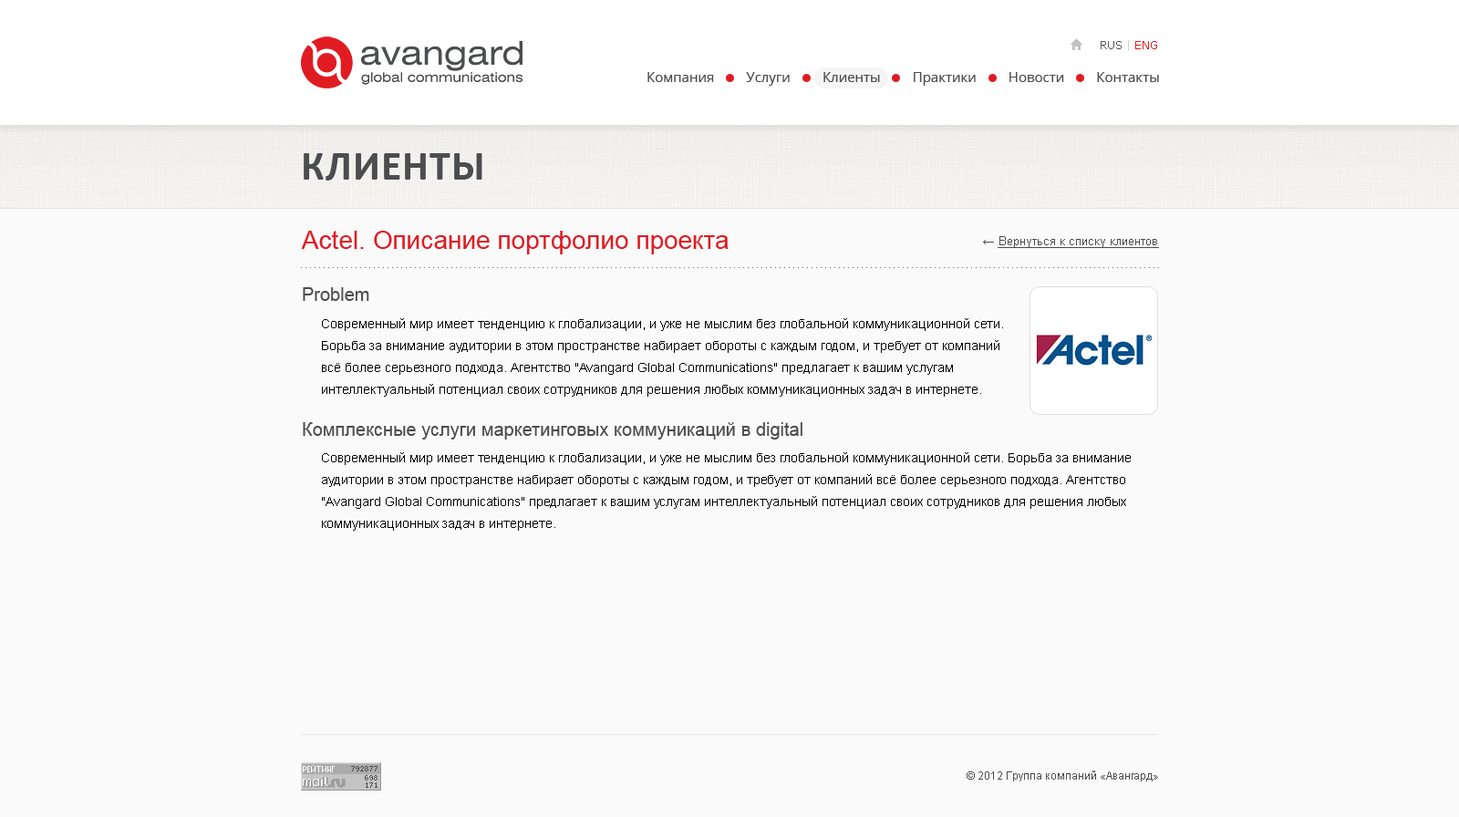
<style>
.page{position:relative;width:1459px;height:817px;background:#fafafa}
.page>*{position:absolute;margin:0}
.t1{font:10.9px "Verdana";color:#555555}
.t2{font:10.9px "Verdana";color:#d1d1d1}
.t3{font:10.9px "Verdana";color:#e11b22}
.t4{font:13.7px "OpenSans";color:#4c4d4f}
.t5{font:42px "Calibri-Bold";letter-spacing:0.02em;color:#4c4d4f;text-transform:uppercase}
.t6{font:25.5px "ArialMT";color:#e11b22}
.t7{font:11.9px "ArialMT";color:#4c4d4f;text-decoration:underline}
.t8{font:12.8px "ArialMT";color:#4c4d4f}
.t9{font:18.2px "ArialMT";color:#4c4d4f}
.t10{font:12.8px/21.9px "ArialMT";color:#000000}
.t11{font:10.9px "ArialMT";color:#4c4d4f}
</style>
<div class="page">
<p class="t1" style="left:1101px;top:40px;width:56px;height:11px">RUS<span class="t2"> | </span><span class="t3">ENG</span></p>
<p class="t4" style="left:648px;top:72px;width:511px;height:14px">Компания         Услуги         Клиенты         Практики         Новости         Контакты</p>
<p class="t5" style="left:304px;top:153px;width:178px;height:28px">Клиенты</p>
<p class="t6" style="left:301px;top:231px;width:428px;height:23px">Аctel. Описание портфолио проекта</p>
<p class="t7" style="left:983px;top:236px;width:176px;height:12px"><span class="t8">← </span>Вернуться к списку клиентов</p>
<p class="t9" style="left:303px;top:287px;width:66px;height:14px">Problem</p>
<p class="t10" style="left:322px;top:318px;width:681px;height:79px">Современный мир имеет тенденцию к глобализации, и уже не мыслим без глобальной коммуникационной сети. Борьба за внимание аудитории в этом пространстве набирает обороты с каждым годом, и требует от компаний всё более серьезного подхода. Агентство "Avangard Global Communications" предлагает к вашим услугам интеллектуальный потенциал своих сотрудников для решения любых коммуникационных задач в интернете.</p>
<p class="t9" style="left:303px;top:422px;width:500px;height:18px">Комплексные услуги маркетинговых коммуникаций в digital</p>
<p class="t10" style="left:322px;top:452px;width:809px;height:79px">Современный мир имеет тенденцию к глобализации, и уже не мыслим без глобальной коммуникационной сети. Борьба за внимание аудитории в этом пространстве набирает обороты с каждым годом, и требует от компаний всё более серьезного подхода. Агентство "Avangard Global Communications" предлагает к вашим услугам интеллектуальный потенциал своих сотрудников для решения любых коммуникационных задач в интернете.</p>
<p class="t11" style="left:967px;top:771px;width:191px;height:11px">© 2012 Группа компаний «Авангард»</p>
</div>
